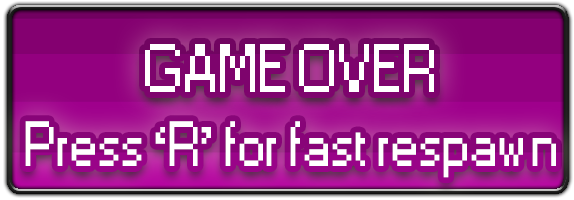
<style>
.page{position:relative;width:574px;height:200px}
.page>*{position:absolute;margin:0}
.t1{font:63.9px "Small Fonts";color:#ffffff}
.t2{font:59.5px "Small Fonts";color:#ffffff}
</style>
<div class="page">
<p class="t1" style="left:145px;top:44px;width:289px;height:48px">GAME OVER</p>
<p class="t2" style="left:25px;top:121px;width:531px;height:57px">Press ‘R’ for fast respawn</p>
</div>
